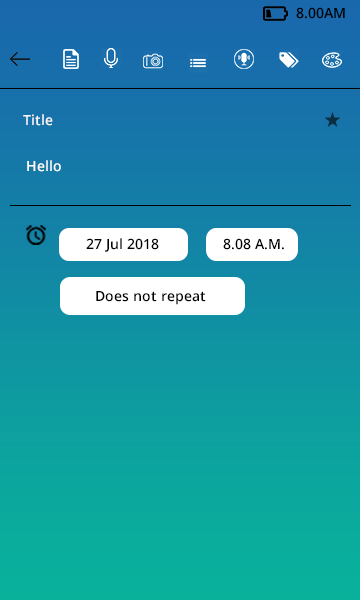
<style>
.page{position:relative;width:360px;height:600px}
.page>*{position:absolute;margin:0}
.t1{font:14px "OpenSans-Semibold";color:#000000}
.t2{font:14px "OpenSans-Semibold";color:#fbf8f8}
.t3{font:14px "OpenSans-Semibold";color:#ffffff}
</style>
<div class="page">
<p class="t1" style="left:296px;top:7px;width:49px;height:12px">8.00AM</p>
<p class="t2" style="left:23px;top:114px;width:30px;height:12px">Title</p>
<p class="t3" style="left:27px;top:160px;width:34px;height:12px">Hello</p>
<p class="t1" style="left:86px;top:238px;width:73px;height:14px">27 Jul 2018</p>
<p class="t1" style="left:223px;top:238px;width:61px;height:12px">8.08 A.M.</p>
<p class="t1" style="left:96px;top:291px;width:110px;height:14px">Does not repeat</p>
</div>
